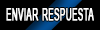
<style>
.page{position:relative;width:100px;height:30px;background:#000000}
.page>*{position:absolute;margin:0}
.t1{font:22.8px "ArialMT";color:#ffffff;font-variant:small-caps;font-weight:bold;scale:0.52 1}
</style>
<div class="page">
<p class="t1" style="left:6px;top:8px;width:88px;height:13px">enviar respuesta</p>
</div>
